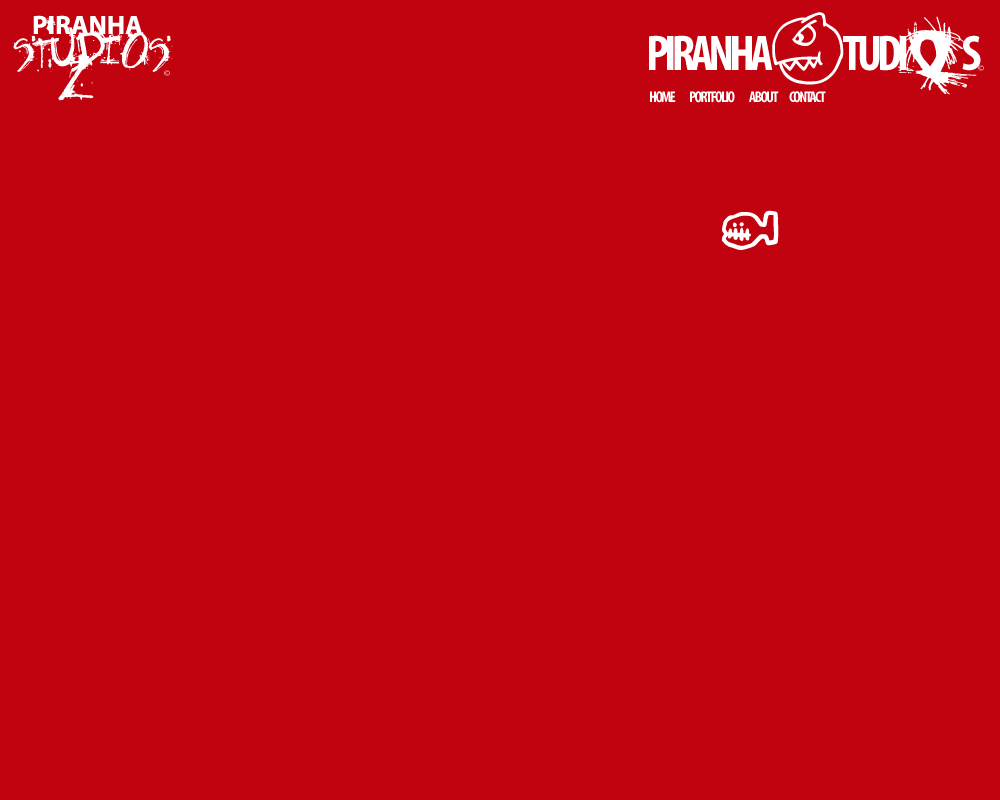
<style>
.page{position:relative;width:1000px;height:800px;background:#c10310}
.page>*{position:absolute;margin:0}
.t1{font:64px "Fh_Obscene";color:#ffffff;font-variant:small-caps}
.t2{font:38px "MyriadPro-Bold";color:#ffffff;font-variant:small-caps}
.t3{font:72px "MyriadPro-BoldCond";letter-spacing:-0.1em;color:#ffffff;font-variant:small-caps}
.t4{font:72px "Fazingsone";letter-spacing:-0.1em;color:#ffffff;font-variant:small-caps}
.t5{font:72px "el&fontgohtic!";color:#ffffff;scale:1.43 1}
.t6{font:9px "MyriadPro-Regular"}
.t7{font:22px "MyriadPro-BoldCond";letter-spacing:-0.1em;color:#ffffff;font-variant:small-caps}
.t8{font:50px "Tombots";color:#ffffff}
</style>
<div class="page">
<p class="t1" style="left:13px;top:17px;width:160px;height:67px">studios</p>
<p class="t2" style="left:33px;top:15px;width:109px;height:19px">piranha</p>
<p class="t3" style="left:772px;top:12px;width:209px;height:73px"><span class="t4">S</span>tudi  s</p>
<p class="t5" style="left:897px;top:16px;width:80px;height:79px">O</p>
<p class="t3" style="left:649px;top:35px;width:124px;height:35px">piranha</p>
<p class="t1" style="left:58px;top:54px;width:36px;height:47px">z</p>
<p class="t6" style="left:978px;top:65px;width:6px;height:6px">©</p>
<p class="t6" style="left:164px;top:70px;width:6px;height:6px">©</p>
<p class="t7" style="left:650px;top:91px;width:26px;height:12px">home</p>
<p class="t7" style="left:690px;top:91px;width:45px;height:12px">portfolio</p>
<p class="t7" style="left:749px;top:91px;width:30px;height:12px">about</p>
<p class="t7" style="left:789px;top:91px;width:37px;height:12px">contact</p>
<p class="t8" style="left:722px;top:210px;width:57px;height:40px">O</p>
</div>
